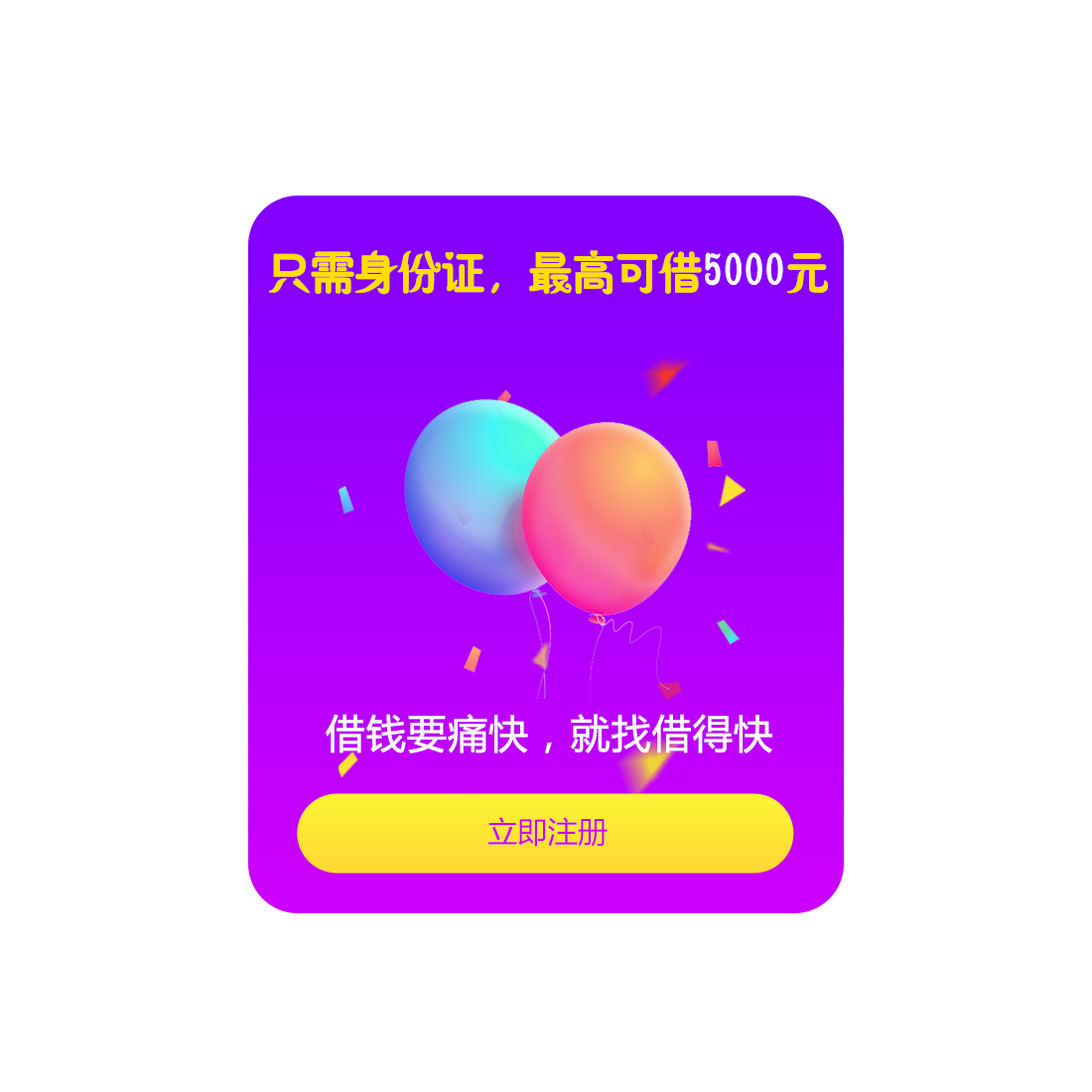
<style>
.page{position:relative;width:1092px;height:1092px;background:#ffffff}
.page>*{position:absolute;margin:0}
.t1{font:45.7px "HYy1gj";letter-spacing:-0.075em;color:#ffde00;font-weight:bold}
.t2{font:45.7px "HYy1gj";letter-spacing:-0.075em;color:#ffffff;font-weight:bold}
.t3{font:39.7px "MicrosoftYaHei";color:#ffffff;font-weight:bold}
.t4{font:30.1px "MicrosoftYaHei";color:#ca00fc}
</style>
<div class="page">
<p class="t1" style="left:269px;top:250px;width:559px;height:45px">只需身份证，最高可借<span class="t2">5000</span>元</p>
<p class="t3" style="left:326px;top:714px;width:446px;height:39px">借钱要痛快，就找借得快</p>
<p class="t4" style="left:487px;top:817px;width:121px;height:30px">立即注册</p>
</div>
